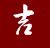
<style>
.page{position:relative;width:50px;height:48px;background:#7d0000}
.page>*{position:absolute;margin:0}
.t1{font:32.4px "Ò¶¸ùÓÑÃ«±ÊÐÐÊé¼òÌå";letter-spacing:0.2em;color:#ffffff}
</style>
<div class="page">
<p class="t1" style="left:13px;top:4px;width:21px;height:31px">吉</p>
</div>
